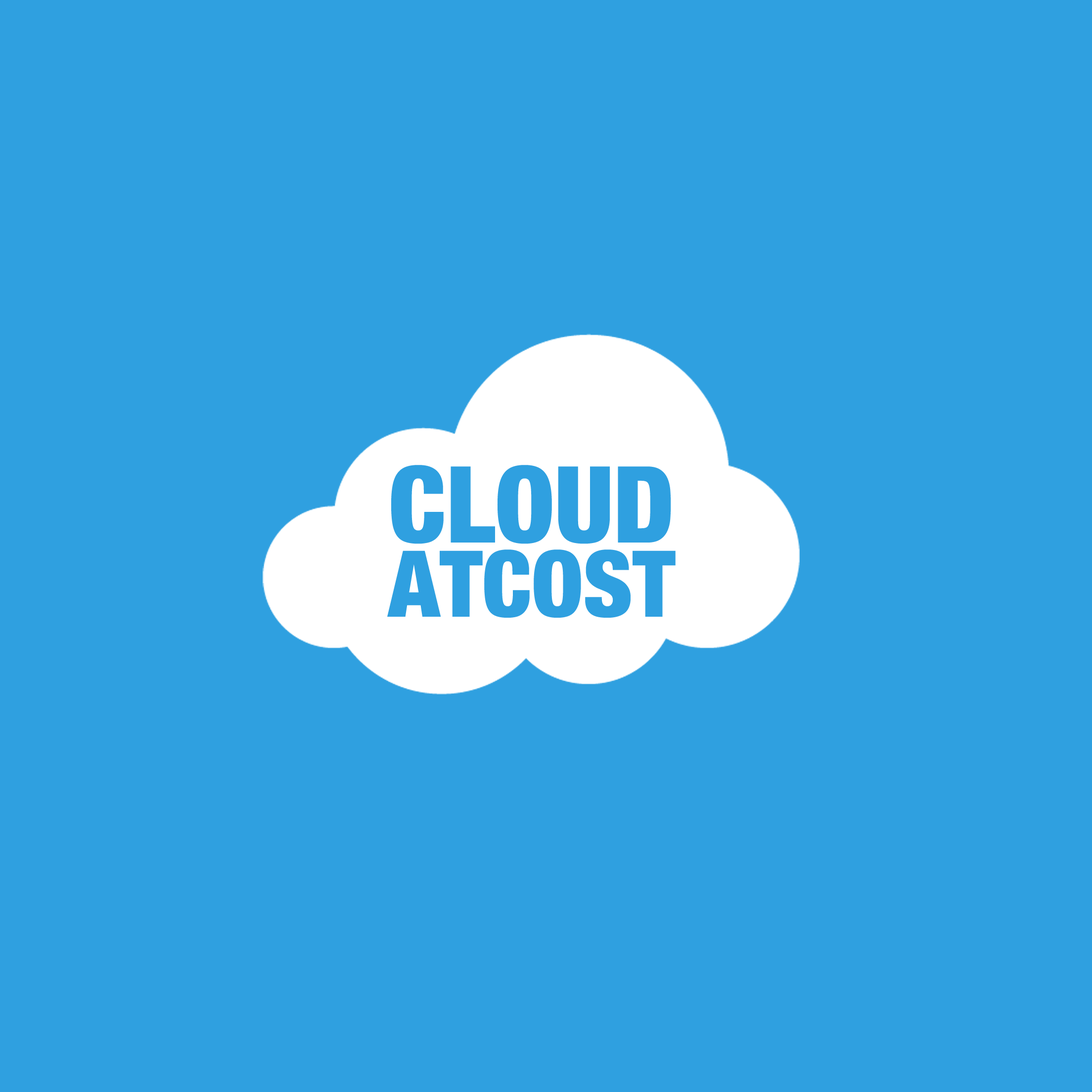
<style>
.page{position:relative;width:1092px;height:1092px;background:#2fa0e0}
.page>*{position:absolute;margin:0}
.t1{font:92.3px/74.5px "HelveticaNeue-CondensedBlack";color:#2fa0e0}
.t2{font:106.4px/74.5px "HelveticaNeue-CondensedBlack";color:#2fa0e0}
</style>
<div class="page">
<p class="t1" style="left:387px;top:465px;width:289px;height:153px;text-align:center"><span class="t2">CLOUD<br></span>ATCOST</p>
</div>
